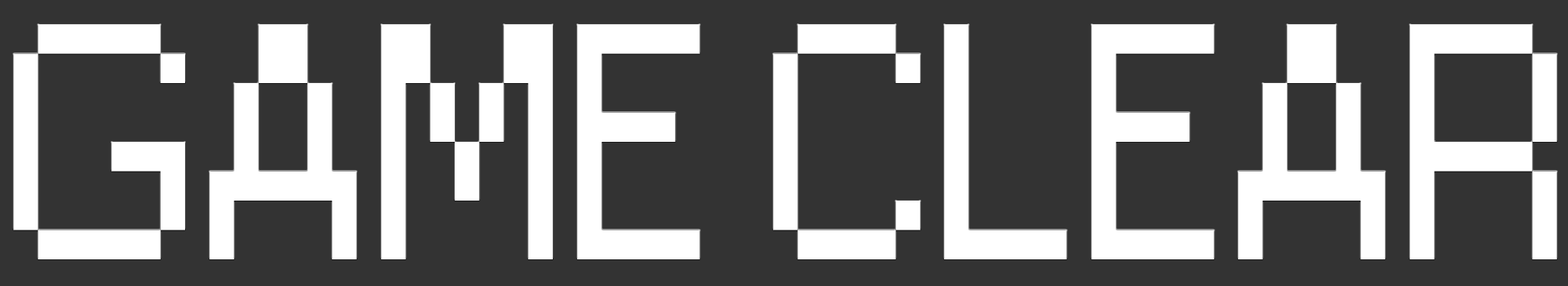
<style>
.page{position:relative;width:1568px;height:286px;background:#333333}
.page>*{position:absolute;margin:0}
.t1{font:313.6px "Small Fonts";color:#ffffff}
</style>
<div class="page">
<p class="t1" style="left:13px;top:24px;width:1544px;height:236px">GAME CLEAR</p>
</div>
